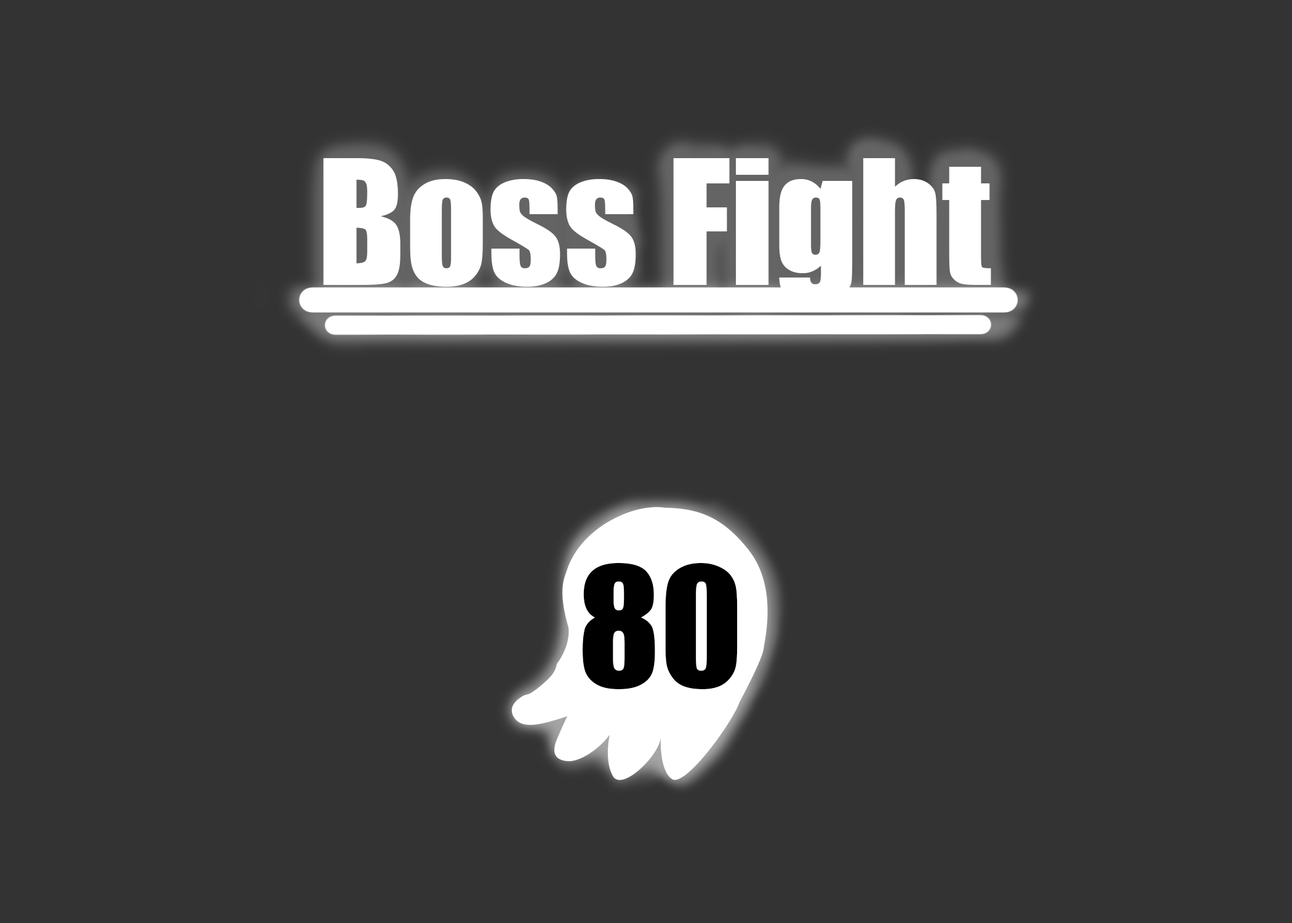
<style>
.page{position:relative;width:1292px;height:923px;background:#333333}
.page>*{position:absolute;margin:0}
.t1{font:160.5px "Impact";color:#ffffff}
.t2{font:153.8px "Impact";color:#000000}
</style>
<div class="page">
<p class="t1" style="left:323px;top:158px;width:668px;height:145px">Boss Fight</p>
<p class="t2" style="left:583px;top:563px;width:155px;height:126px">80</p>
</div>
